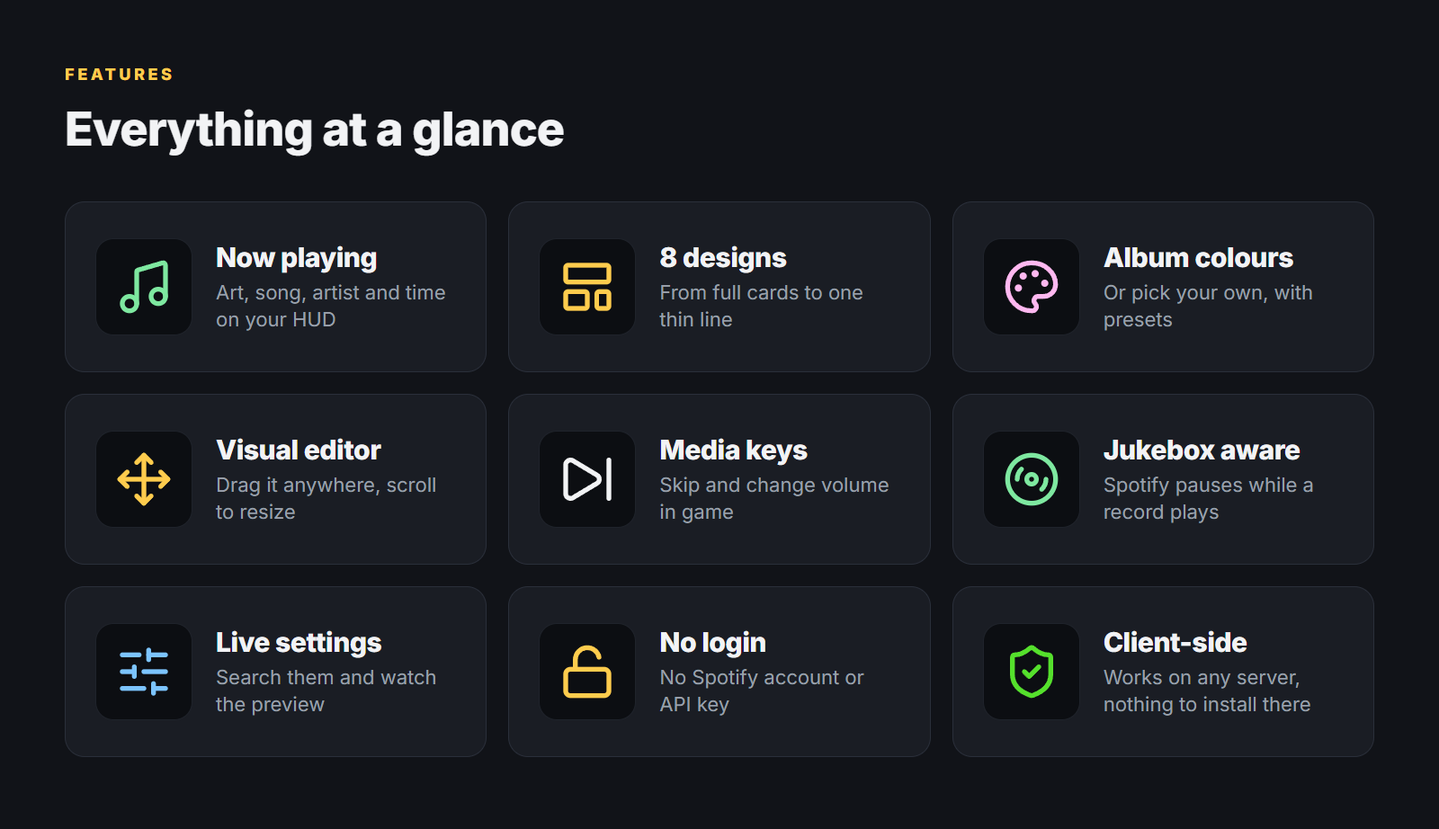
<style>
.page{position:relative;width:1439px;height:829px;background:#111318}
.page>*{position:absolute;margin:0}
.t1{font:16.2px "Inter-ExtraBold";letter-spacing:0.2em;color:#ffcc4d}
.t2{font:46.8px "Inter-ExtraBold";letter-spacing:-0.015em;color:#f2f3f5}
.t3{font:27px "Inter-ExtraBold";letter-spacing:-0.013em;color:#f2f3f5}
.t4{font:19.8px/27px "Inter-Regular";color:#9aa0ab}
</style>
<div class="page">
<p class="t1" style="left:65px;top:67px;width:107px;height:14px">FEATURES</p>
<p class="t2" style="left:67px;top:109px;width:497px;height:47px">Everything at a glance</p>
<p class="t3" style="left:217px;top:245px;width:160px;height:28px">Now playing</p>
<p class="t3" style="left:660px;top:245px;width:127px;height:28px">8 designs</p>
<p class="t3" style="left:1103px;top:247px;width:190px;height:21px">Album colours</p>
<p class="t4" style="left:216px;top:284px;width:229px;height:47px">Art, song, artist and time on your HUD</p>
<p class="t4" style="left:659px;top:284px;width:204px;height:43px">From full cards to one thin line</p>
<p class="t4" style="left:1103px;top:284px;width:209px;height:47px">Or pick your own, with presets</p>
<p class="t3" style="left:216px;top:438px;width:165px;height:22px">Visual editor</p>
<p class="t3" style="left:660px;top:438px;width:147px;height:28px">Media keys</p>
<p class="t3" style="left:1103px;top:440px;width:197px;height:20px">Jukebox aware</p>
<p class="t4" style="left:215px;top:477px;width:220px;height:43px">Drag it anywhere, scroll to resize</p>
<p class="t4" style="left:660px;top:477px;width:228px;height:46px">Skip and change volume in game</p>
<p class="t4" style="left:1103px;top:477px;width:210px;height:46px">Spotify pauses while a record plays</p>
<p class="t3" style="left:217px;top:630px;width:165px;height:28px">Live settings</p>
<p class="t3" style="left:660px;top:630px;width:105px;height:28px">No login</p>
<p class="t3" style="left:1103px;top:630px;width:144px;height:23px">Client-side</p>
<p class="t4" style="left:215px;top:669px;width:221px;height:47px">Search them and watch the preview</p>
<p class="t4" style="left:659px;top:669px;width:205px;height:47px">No Spotify account or API key</p>
<p class="t4" style="left:1103px;top:670px;width:207px;height:46px">Works on any server, nothing to install there</p>
</div>
